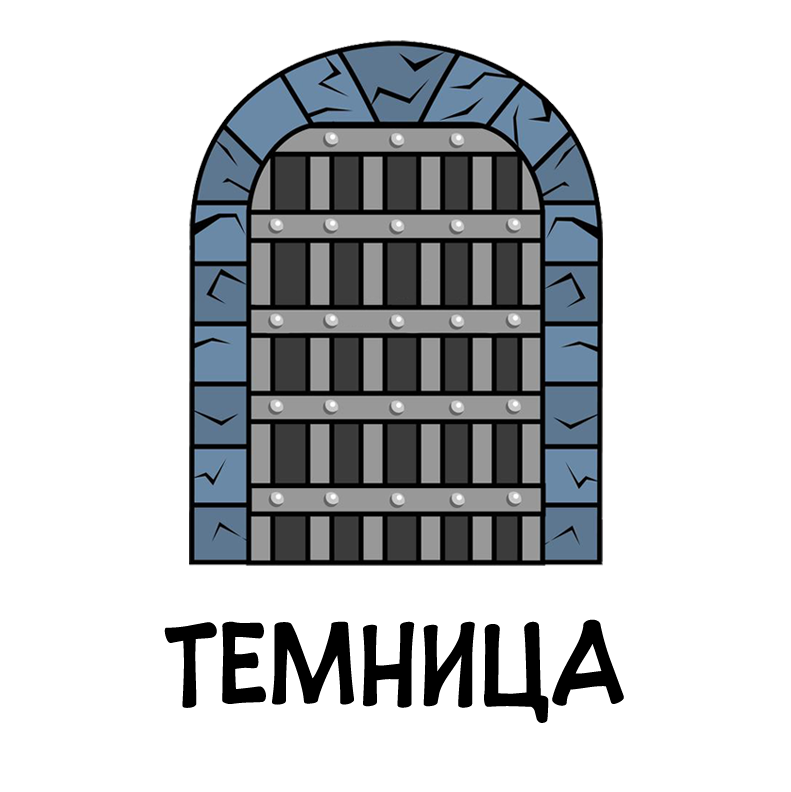
<style>
.page{position:relative;width:791px;height:792px;background:#ffffff}
.page>*{position:absolute;margin:0}
.t1{font:108.3px "V_10CentComics";color:#000000;text-transform:uppercase;scale:0.95 1}
</style>
<div class="page">
<p class="t1" style="left:164px;top:619px;width:460px;height:104px">Темница</p>
</div>
